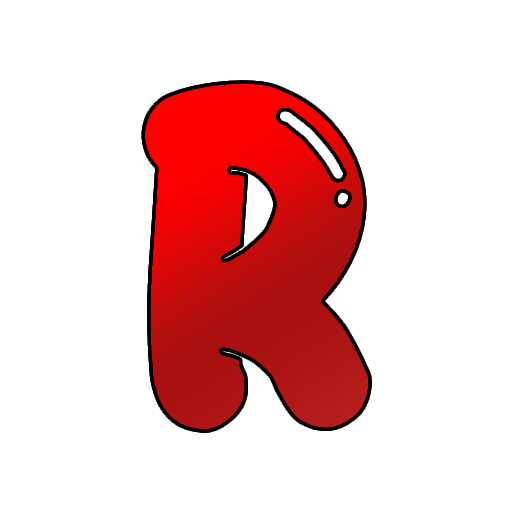
<style>
.page{position:relative;width:512px;height:512px;background:#ffffff}
.page>*{position:absolute;margin:0}
.t1{font:450px "PlaydohRegular"}
</style>
<div class="page">
<p class="t1" style="left:141px;top:80px;width:230px;height:352px">R</p>
</div>
